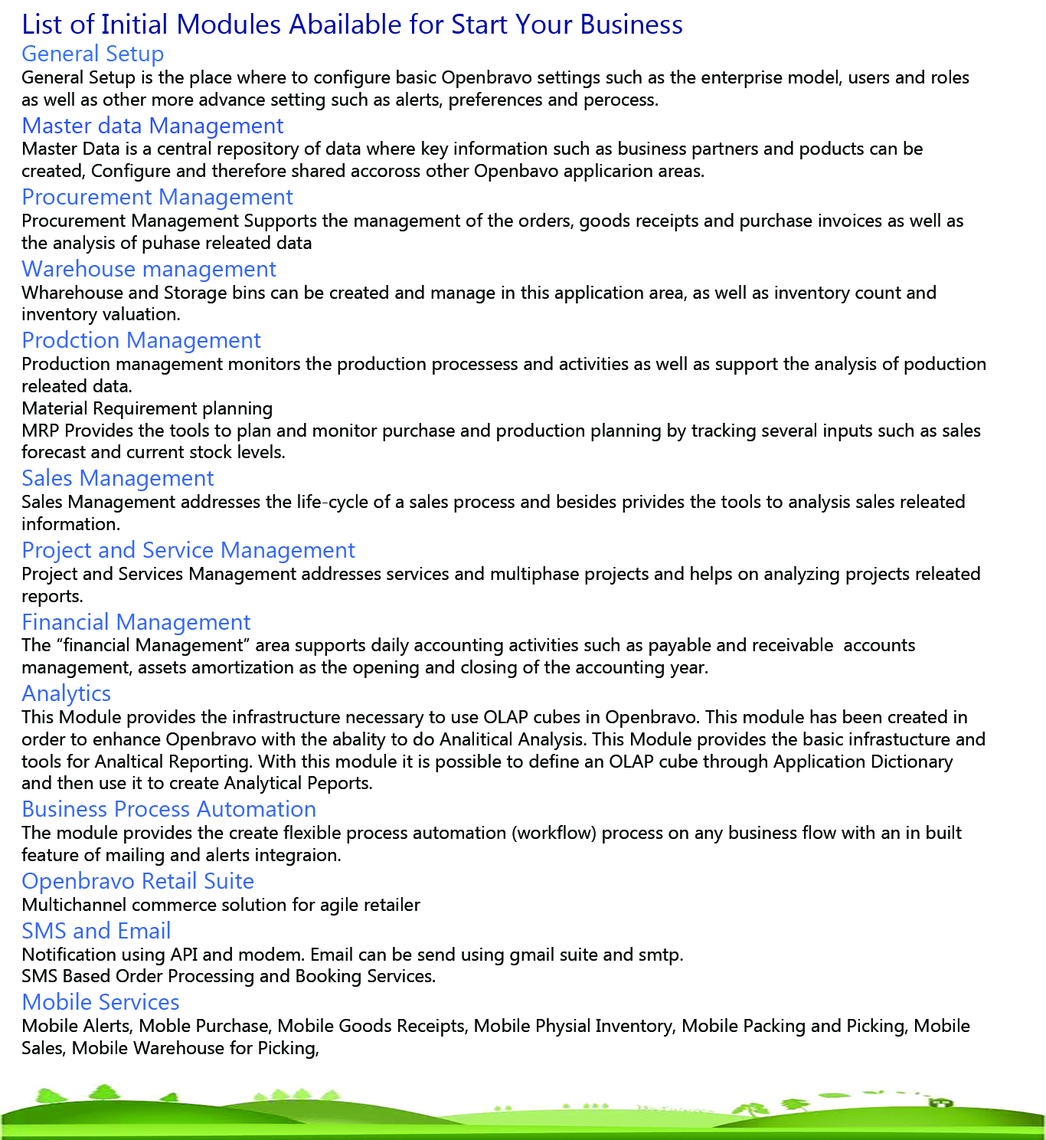
<style>
.page{position:relative;width:1046px;height:1140px;background:#ffffff}
.page>*{position:absolute;margin:0}
.t1{font:18.4px "MyanmarText";color:#070809}
.t2{font:27.6px "MyanmarText";color:#000aa9}
.t3{font:23px "MyanmarText";color:#3572ff}
.t4{font:18.4px "MyanmarText";color:#070a0a}
.t5{font:23px "MyanmarText";color:#2a51ff}
.t6{font:18.4px "MyanmarText";color:#070909}
.t7{font:23px "MyanmarText";color:#3265ff}
.t8{font:18.4px "MyanmarText";color:#060808}
</style>
<div class="page">
<p class="t1" style="left:21px;top:13px;width:965px;height:1046px"><span class="t2">List of Initial Modules Abailable for Start Your Business<br></span><span class="t3">General Setup<br></span><span class="t4">General Setup is the place where to configure basic Openbravo settings such as the enterprise model, users and roles<br>as well as other more advance setting such as alerts, preferences and perocess.<br></span><span class="t5">Master data Management<br></span><span class="t6">Master Data is a central repository of data where key information such as business partners and poducts can be<br>created, Configure and therefore shared accoross other Openbavo applicarion areas.<br></span><span class="t7">Procurement Management<br></span><span class="t6">Procurement Management Supports the management of the orders, goods receipts and purchase invoices as well as<br>the analysis of puhase releated data<br></span><span class="t7">Warehouse management<br></span><span class="t6">Wharehouse and Storage bins can be created and manage in this application area, as well as inventory count and<br>inventory valuation.<br></span><span class="t7">Prodction Management<br></span><span class="t6">Production management monitors the production processess and activities as well as support the analysis of poduction<br>releated data.<br>Material Requirement planning<br>MRP Provides the tools to plan and monitor purchase and production planning by tracking several inputs such as sales<br>forecast and current stock levels.<br></span><span class="t7">Sales Management<br></span><span class="t8">Sales Management addresses the life-cycle of a sales process and besides privides the tools to analysis sales releated <br>information.<br></span><span class="t7">Project and Service Management<br></span>Project and Services Management addresses services and multiphase projects and helps on analyzing projects releated<br>reports.<br><span class="t7">Financial Management<br></span><span class="t6">The “financial Management” area supports daily accounting activities such as payable and receivable  accounts<br>management, assets amortization as the opening and closing of the accounting year.<br></span><span class="t7">Analytics<br></span>This Module provides the infrastructure necessary to use OLAP cubes in Openbravo. This module has been created in <br>order to enhance Openbravo with the abality to do Analitical Analysis. This Module provides the basic infrastucture and<br>tools for Analtical Reporting. With this module it is possible to define an OLAP cube through Application Dictionary<br>and then use it to create Analytical Peports.<br><span class="t7">Business Process Automation<br></span><span class="t6">The module provides the create flexible process automation (workflow) process on any business flow with an in built<br>feature of mailing and alerts integraion.<br></span><span class="t7">Openbravo Retail Suite<br></span>Multichannel commerce solution for agile retailer<br><span class="t7">SMS and Email<br></span>Notification using API and modem. Email can be send using gmail suite and smtp.<br>SMS Based Order Processing and Booking Services.<br><span class="t7">Mobile Services <br></span><span class="t6">Mobile Alerts, Moble Purchase, Mobile Goods Receipts, Mobile Physial Inventory, Mobile Packing and Picking, Mobile <br>Sales, Mobile Warehouse for Picking,</span></p>
</div>
